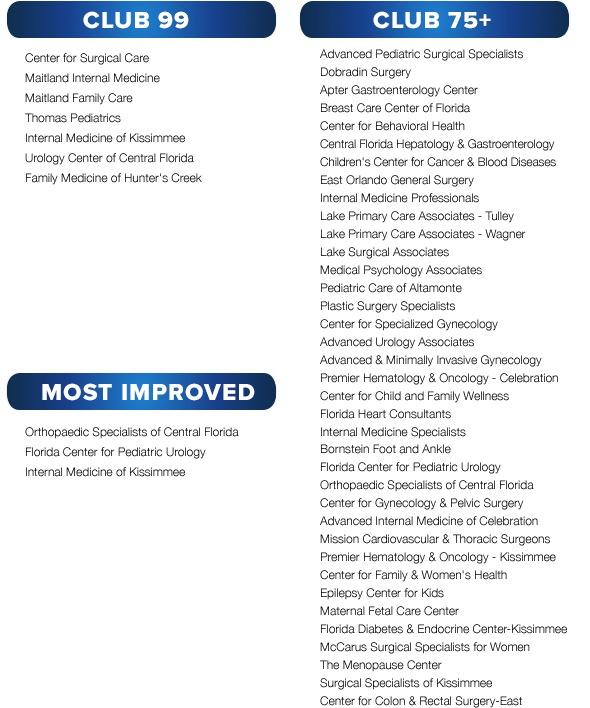
<style>
.page{position:relative;width:590px;height:708px;background:#ffffff}
.page>*{position:absolute;margin:0}
.t1{font:24px "ProximaNova-Extrabld";letter-spacing:0.05em;color:#ffffff;text-transform:uppercase}
.t2{font:12px/6px "HelveticaNeue-Light";color:#000000}
.t3{font:12px/4px "HelveticaNeue-Light";color:#000000}
.t4{font:12px/4px "HelveticaNeue-Light";letter-spacing:-0.01em;color:#000000}
</style>
<div class="page">
<p class="t1" style="left:83px;top:11px;width:106px;height:18px">Club 99</p>
<p class="t1" style="left:373px;top:11px;width:118px;height:18px">Club 75+</p>
<p class="t2" style="left:25px;top:53px;width:177px;height:132px">Center for Surgical Care<br>Maitland Internal Medicine<br>Maitland Family Care<br>Thomas Pediatrics<br>Internal Medicine of Kissimmee<br>Urology Center of Central Florida<br>Family Medicine of Hunter's Creek</p>
<p class="t3" style="left:320px;top:49px;width:247px;height:659px">Advanced Pediatric Surgical Specialists<br>Dobradin Surgery<br>Apter Gastroenterology Center<br>Breast Care Center of Florida<br>Center for Behavioral Health<br><span class="t4">Central Florida Hepatology &amp; Gastroenterology <br>Children's Center for Cancer &amp; Blood Diseases <br></span>East Orlando General Surgery<br>Internal Medicine Professionals<br>Lake Primary Care Associates - Tulley<br>Lake Primary Care Associates - Wagner<br>Lake Surgical Associates<br>Medical Psychology Associates<br>Pediatric Care of Altamonte<br>Plastic Surgery Specialists<br>Center for Specialized Gynecology <br>Advanced Urology Associates <br>Advanced &amp; Minimally Invasive Gynecology <br>Premier Hematology &amp; Oncology - Celebration<br>Center for Child and Family Wellness<br>Florida Heart Consultants<br>Internal Medicine Specialists<br>Bornstein Foot and Ankle<br>Florida Center for Pediatric Urology<br>Orthopaedic Specialists of Central Florida   <br>Center for Gynecology &amp; Pelvic Surgery<br>Advanced Internal Medicine of Celebration<br>Mission Cardiovascular &amp; Thoracic Surgeons<br>Premier Hematology &amp; Oncology - Kissimmee<br>Center for Family &amp; Women's Health<br>Epilepsy Center for Kids<br>Maternal Fetal Care Center<br>Florida Diabetes &amp; Endocrine Center-Kissimmee<br>McCarus Surgical Specialists for Women<br>The Menopause Center<br>Surgical Specialists of Kissimmee<br>Center for Colon &amp; Rectal Surgery-East</p>
<p class="t1" style="left:42px;top:383px;width:213px;height:18px">Most Improved</p>
<p class="t2" style="left:25px;top:427px;width:214px;height:50px">Orthopaedic Specialists of Central Florida   <br>Florida Center for Pediatric Urology<br>Internal Medicine of Kissimmee</p>
</div>
